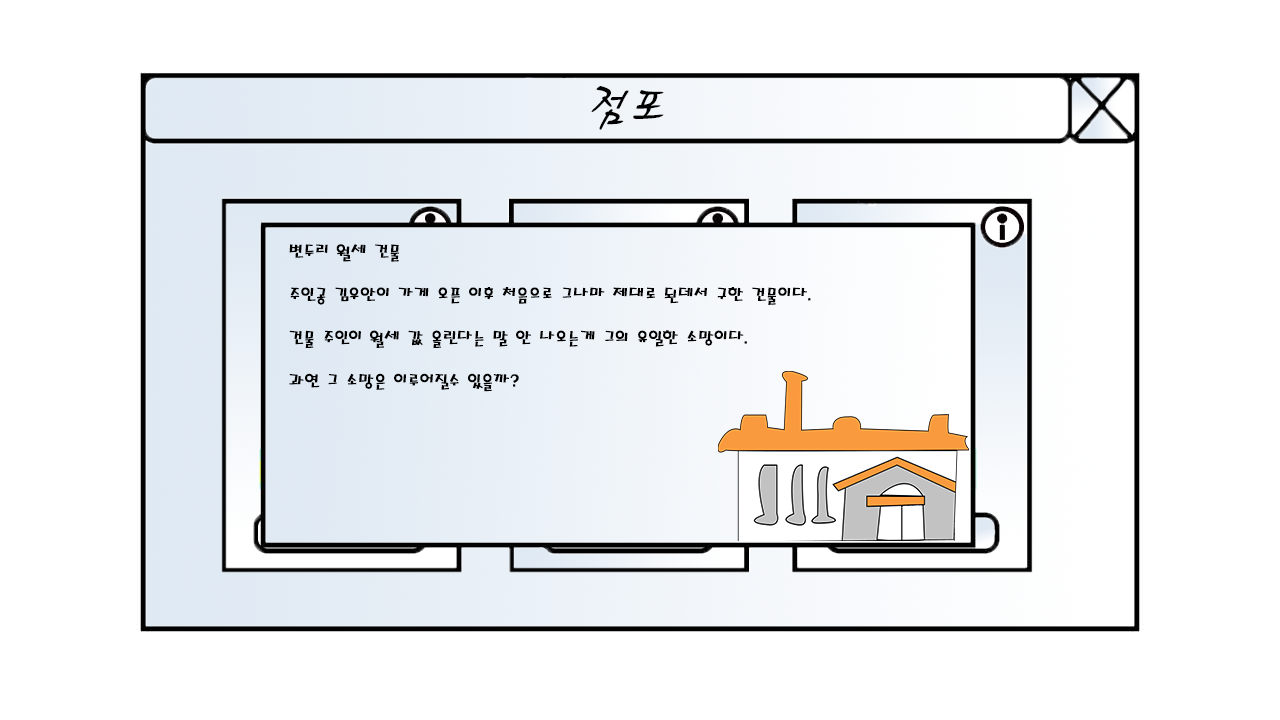
<style>
.page{position:relative;width:1280px;height:720px;background:#ffffff}
.page>*{position:absolute;margin:0}
.t1{font:60px "HaanCjaB";color:#010101}
.t2{font:18px "MagicR-HM";color:#000000}
</style>
<div class="page">
<p class="t1" style="left:591px;top:86px;width:73px;height:44px">점포</p>
<p class="t2" style="left:289px;top:244px;width:522px;height:148px">변두리 월세 건물<br><br>주인공 김우안이 가게 오픈 이후 처음으로 그나마 제대로 된데서 구한 건물이다.<br><br>건물 주인이 월세 값 올린다는 말 안 나오는게 그의 유일한 소망이다.<br><br>과연 그 소망은 이루어질수 있을까?</p>
</div>
